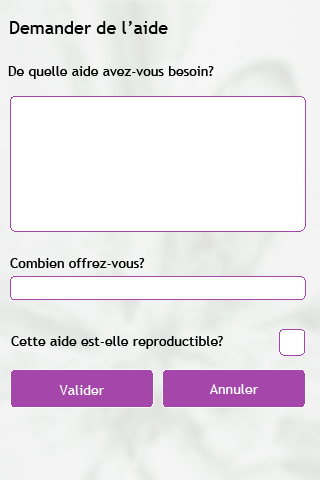
<style>
.page{position:relative;width:320px;height:480px;background:#ffffff}
.page>*{position:absolute;margin:0}
.t1{font:18px "TrebuchetMS";color:#000000}
.t2{font:14px "TrebuchetMS";color:#000000}
.t3{font:14px "TrebuchetMS";color:#ffffff}
</style>
<div class="page">
<p class="t1" style="left:10px;top:21px;width:158px;height:13px">Demander de l’aide</p>
<p class="t2" style="left:8px;top:66px;width:206px;height:13px">De quelle aide avez-vous besoin?</p>
<p class="t2" style="left:10px;top:258px;width:135px;height:10px">Combien offrez-vous?</p>
<p class="t2" style="left:11px;top:336px;width:212px;height:13px">Cette aide est-elle reproductible?</p>
<p class="t3" style="left:59px;top:385px;width:46px;height:10px">Valider</p>
<p class="t3" style="left:209px;top:384px;width:50px;height:10px">Annuler</p>
</div>
